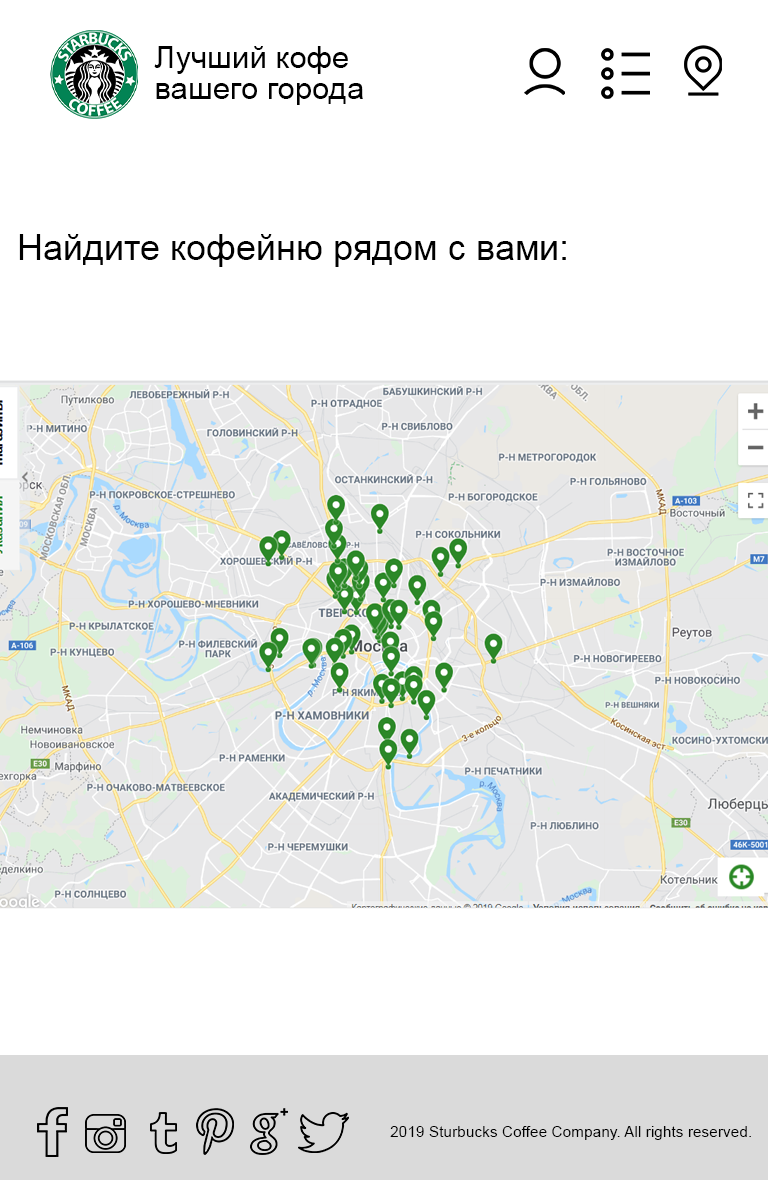
<style>
.page{position:relative;width:768px;height:1180px;background:#ffffff}
.page>*{position:absolute;margin:0}
.t1{font:31px/31px "ArialMT";color:#000000}
.t2{font:36px "ArialMT";color:#000000}
.t3{font:15.5px "ArialMT";color:#000000}
</style>
<div class="page">
<p class="t1" style="left:154px;top:46px;width:209px;height:59px">Лучший кофе<br>вашего города</p>
<p class="t2" style="left:19px;top:234px;width:547px;height:33px">Найдите кофейню рядом с вами:</p>
<p class="t3" style="left:390px;top:1126px;width:361px;height:14px">2019 Sturbucks Coffee Company. All rights reserved.</p>
</div>
